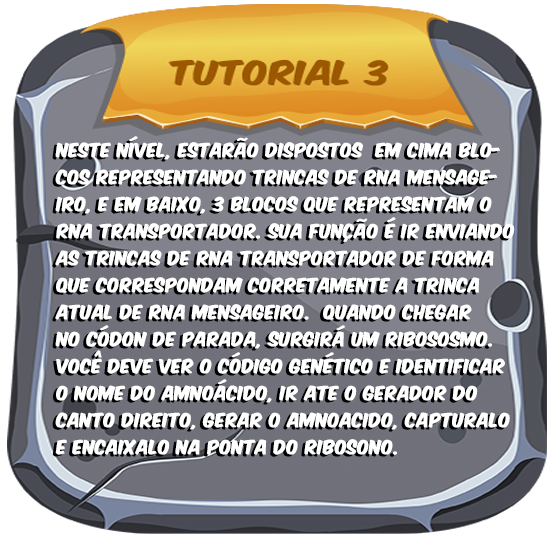
<style>
.page{position:relative;width:554px;height:534px;background:#ffffff}
.page>*{position:absolute;margin:0}
.t1{font:16.6px/27px "KomikaAxis";color:#ffffff;font-weight:bold}
</style>
<div class="page">
<p class="t1" style="left:55px;top:136px;width:460px;height:319px">nESTE NÍVEL, estarão dispostos  em cima blo-<br>cos representando trincas de RNA Mensage-<br>iro, e em baixo, 3 blocos que representam o <br>rna transportador. sua função é ir enviando<br>as trincas de rna transportador de forma<br>que correspondam corretamente a trinca<br>atual de rna mensageiro.  Quando chegar<br>no códon de parada, surgirá um ribososmo.<br>você deve ver o código genético e identificar<br>o nome do amnoácido, ir ate o gerador do<br>canto direito, gerar o amnoacido, capturalo<br>e encaixalo na ponta do ribosono.</p>
</div>
